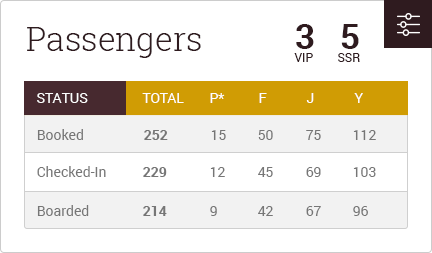
<style>
.page{position:relative;width:432px;height:253px;background:#ffffff}
.page>*{position:absolute;margin:0}
.t1{font:33px "RobotoSlab-Light";color:#2f1b1f}
.t2{font:35.1px "Roboto-Bold";color:#2f1b1f}
.t3{font:12px "Roboto-Regular";color:#2f1b1f}
.t4{font:14px "Roboto-Regular";color:#ffffff;text-transform:uppercase}
.t5{font:14px "Roboto-Regular";color:#767676}
.t6{font:14px "Roboto-Bold";color:#767676}
</style>
<div class="page">
<p class="t1" style="left:27px;top:27px;width:174px;height:31px">Passengers</p>
<p class="t2" style="left:296px;top:24px;width:18px;height:25px">3</p>
<p class="t2" style="left:341px;top:24px;width:18px;height:25px">5</p>
<p class="t3" style="left:294px;top:53px;width:19px;height:9px">VIP</p>
<p class="t3" style="left:338px;top:53px;width:22px;height:9px">SSR</p>
<p class="t4" style="left:37px;top:93px;width:51px;height:10px">Status</p>
<p class="t4" style="left:142px;top:93px;width:42px;height:10px">Total</p>
<p class="t4" style="left:210px;top:93px;width:15px;height:10px">P*</p>
<p class="t4" style="left:259px;top:93px;width:8px;height:10px">F</p>
<p class="t4" style="left:306px;top:93px;width:8px;height:10px">J</p>
<p class="t4" style="left:354px;top:93px;width:9px;height:10px">Y</p>
<p class="t5" style="left:37px;top:129px;width:46px;height:11px">Booked</p>
<p class="t6" style="left:144px;top:130px;width:24px;height:10px">252</p>
<p class="t5" style="left:211px;top:130px;width:15px;height:10px">15</p>
<p class="t5" style="left:258px;top:130px;width:15px;height:10px">50</p>
<p class="t5" style="left:306px;top:130px;width:15px;height:10px">75</p>
<p class="t5" style="left:353px;top:130px;width:23px;height:10px">112</p>
<p class="t5" style="left:37px;top:166px;width:69px;height:11px">Checked-In</p>
<p class="t6" style="left:143px;top:167px;width:24px;height:10px">229</p>
<p class="t5" style="left:210px;top:167px;width:15px;height:10px">12</p>
<p class="t5" style="left:258px;top:167px;width:15px;height:10px">45</p>
<p class="t5" style="left:306px;top:167px;width:15px;height:10px">69</p>
<p class="t5" style="left:353px;top:167px;width:23px;height:10px">103</p>
<p class="t5" style="left:37px;top:205px;width:52px;height:11px">Boarded</p>
<p class="t6" style="left:143px;top:206px;width:24px;height:10px">214</p>
<p class="t5" style="left:210px;top:206px;width:7px;height:10px">9</p>
<p class="t5" style="left:258px;top:206px;width:15px;height:10px">42</p>
<p class="t5" style="left:306px;top:206px;width:15px;height:10px">67</p>
<p class="t5" style="left:353px;top:206px;width:15px;height:10px">96</p>
</div>
